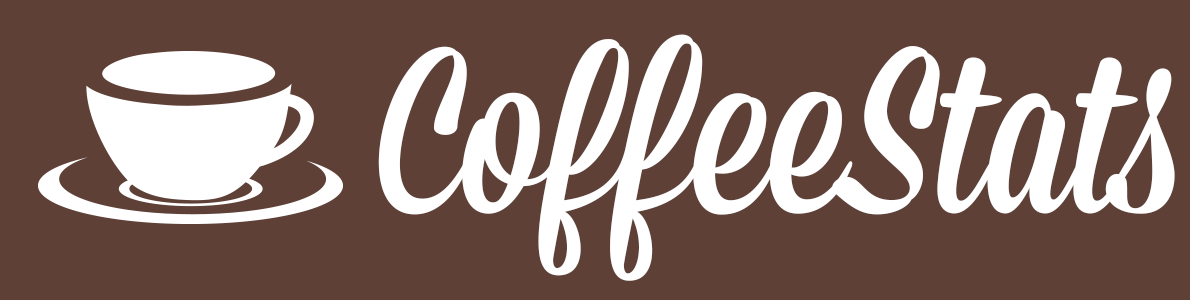
<style>
.page{position:relative;width:1190px;height:300px;background:#5e4037}
.page>*{position:absolute;margin:0}
.t1{font:233.7px "Mission-Script";color:#ffffff}
</style>
<div class="page">
<p class="t1" style="left:378px;top:34px;width:797px;height:247px">CoffeeStats</p>
</div>
